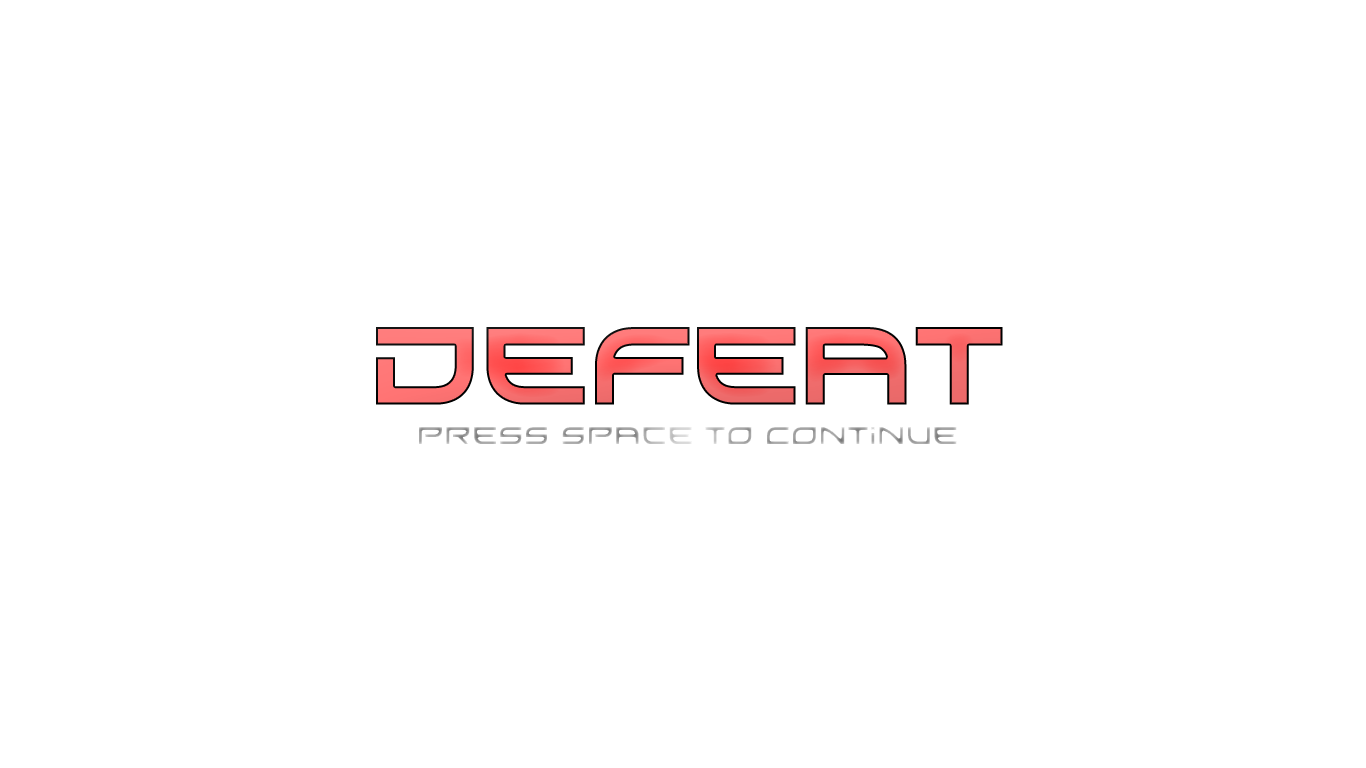
<style>
.page{position:relative;width:1366px;height:768px;background:#ffffff}
.page>*{position:absolute;margin:0}
.t1{font:100px "Xirod-Regular"}
.t2{font:24px "Xirod-Regular"}
</style>
<div class="page">
<p class="t1" style="left:376px;top:327px;width:627px;height:78px">Defeat</p>
<p class="t2" style="left:418px;top:426px;width:540px;height:19px">press Space to Continue</p>
</div>
